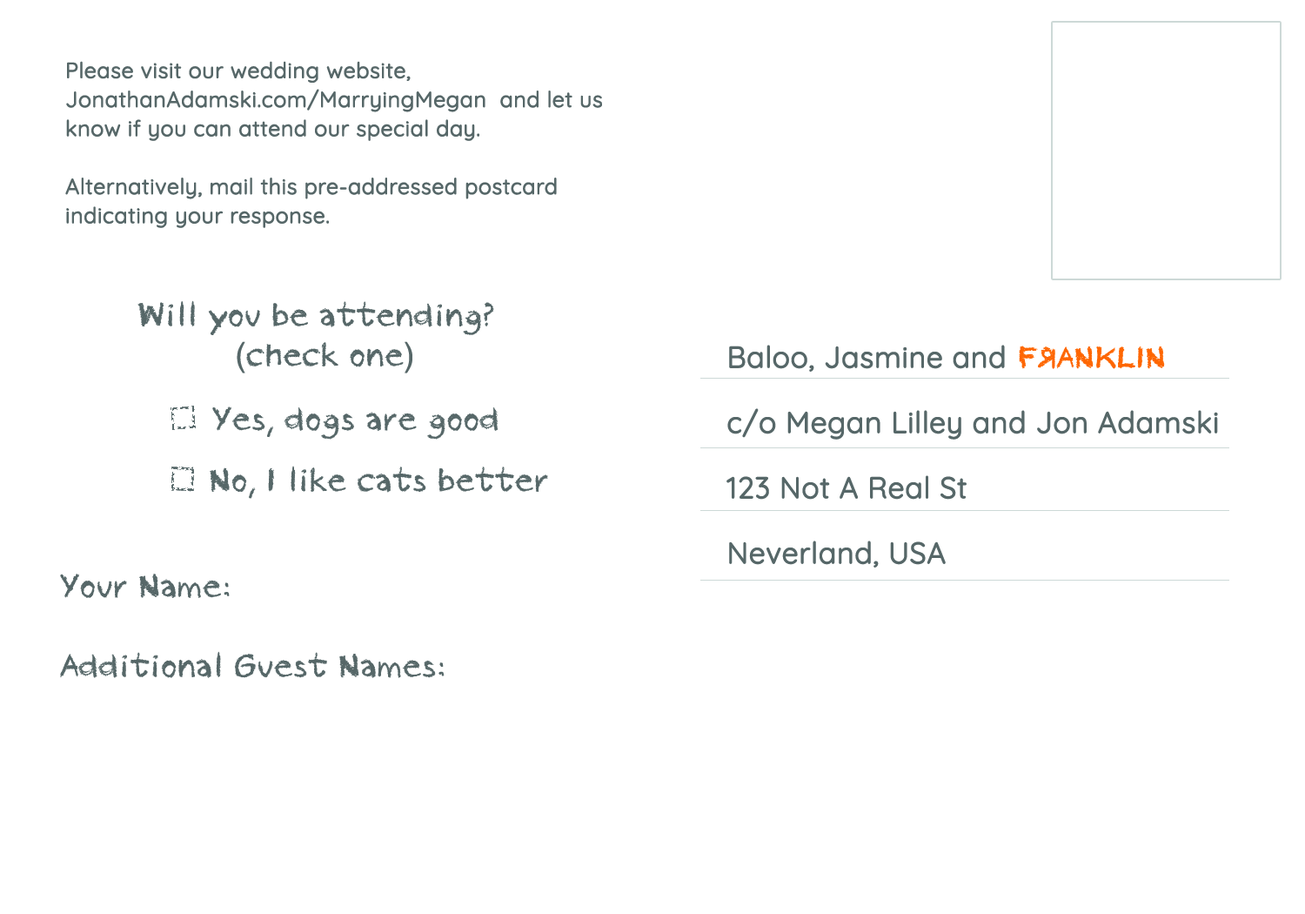
<style>
.page{position:relative;width:1305px;height:914px;background:#ffffff}
.page>*{position:absolute;margin:0}
.t1{font:21.8px/29px "Quicksand-Regular";color:#566768;font-weight:bold}
.t2{font:33.2px/39.9px "pastel";color:#566768}
.t3{font:33.2px/39.9px "Helvetica";color:#566768}
.t4{font:29.7px/65.3px "Quicksand-Regular";color:#566768;font-weight:bold}
.t5{font:33.2px "pastel";color:#566768}
</style>
<div class="page">
<p class="t1" style="left:65px;top:61px;width:537px;height:167px">Please visit our wedding website, JonathanAdamski.com/MarryingMegan  and let us know if you can attend our special day.<br><br>Alternatively, mail this pre-addressed postcard indicating your response.</p>
<p class="t2" style="left:137px;top:300px;width:357px;height:73px;text-align:center">Will you be attending?<br>(<span class="t3">(</span>check one<span class="t3">)</span></p>
<p class="t4" style="left:727px;top:345px;width:491px;height:222px">Baloo, Jasmine and <br>c/o Megan Lilley and Jon Adamski<br>123 Not A Real St<br>Neverland, USA</p>
<p class="t5" style="left:212px;top:406px;width:287px;height:33px">Yes, dogs are good</p>
<p class="t5" style="left:210px;top:466px;width:338px;height:33px">No, I like cats better</p>
<p class="t2" style="left:60px;top:573px;width:385px;height:105px">Your Name:<br><br>Additional Guest Names:</p>
</div>
